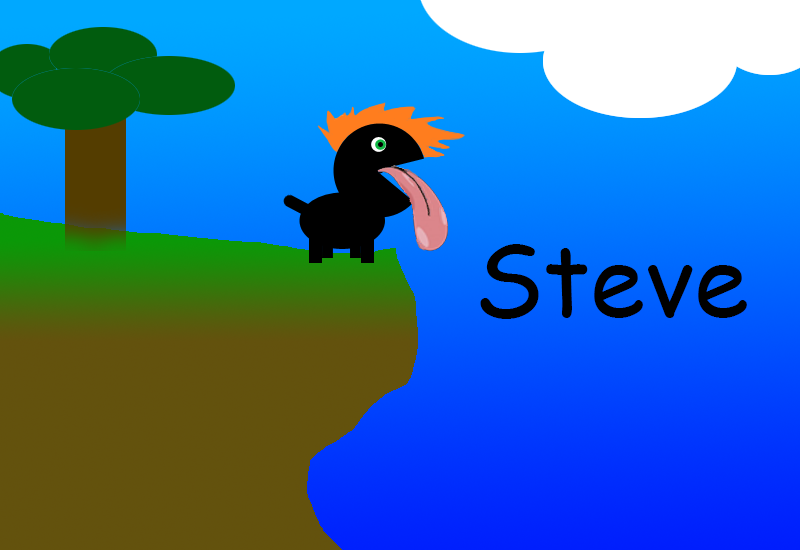
<style>
.page{position:relative;width:800px;height:550px}
.page>*{position:absolute;margin:0}
.t1{font:100px "ComicSansMS";color:#000000}
</style>
<div class="page">
<p class="t1" style="left:480px;top:244px;width:267px;height:75px">Steve</p>
</div>
